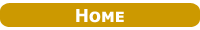
<style>
.page{position:relative;width:200px;height:30px;background:#cc9900}
.page>*{position:absolute;margin:0}
.t1{font:17.9px "TahomaSmallCap-Bold";color:#ffffff}
</style>
<div class="page">
<p class="t1" style="left:76px;top:9px;width:48px;height:14px">Home</p>
</div>
